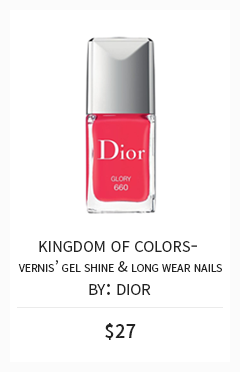
<style>
.page{position:relative;width:240px;height:372px;background:#ffffff}
.page>*{position:absolute;margin:0}
.t1{font:16.7px/20.8px "SourceSansPro-Regular";color:#232323;font-variant:small-caps}
.t2{font:23.6px/20.8px "SourceSansPro-Regular";color:#232323;font-variant:small-caps}
.t3{font:23.6px "SourceSansPro-Regular";color:#232323;font-variant:small-caps}
.t4{font:20.6px "SourceSansPro-Semibold";color:#232323}
</style>
<div class="page">
<p class="t1" style="left:18px;top:241px;width:204px;height:31px;text-align:center"><span class="t2">kingdom of colors- <br></span>vernis’ gel shine &amp; long wear nails</p>
<p class="t3" style="left:89px;top:283px;width:62px;height:12px">by: dior</p>
<p class="t4" style="left:105px;top:323px;width:31px;height:17px">$27</p>
</div>
